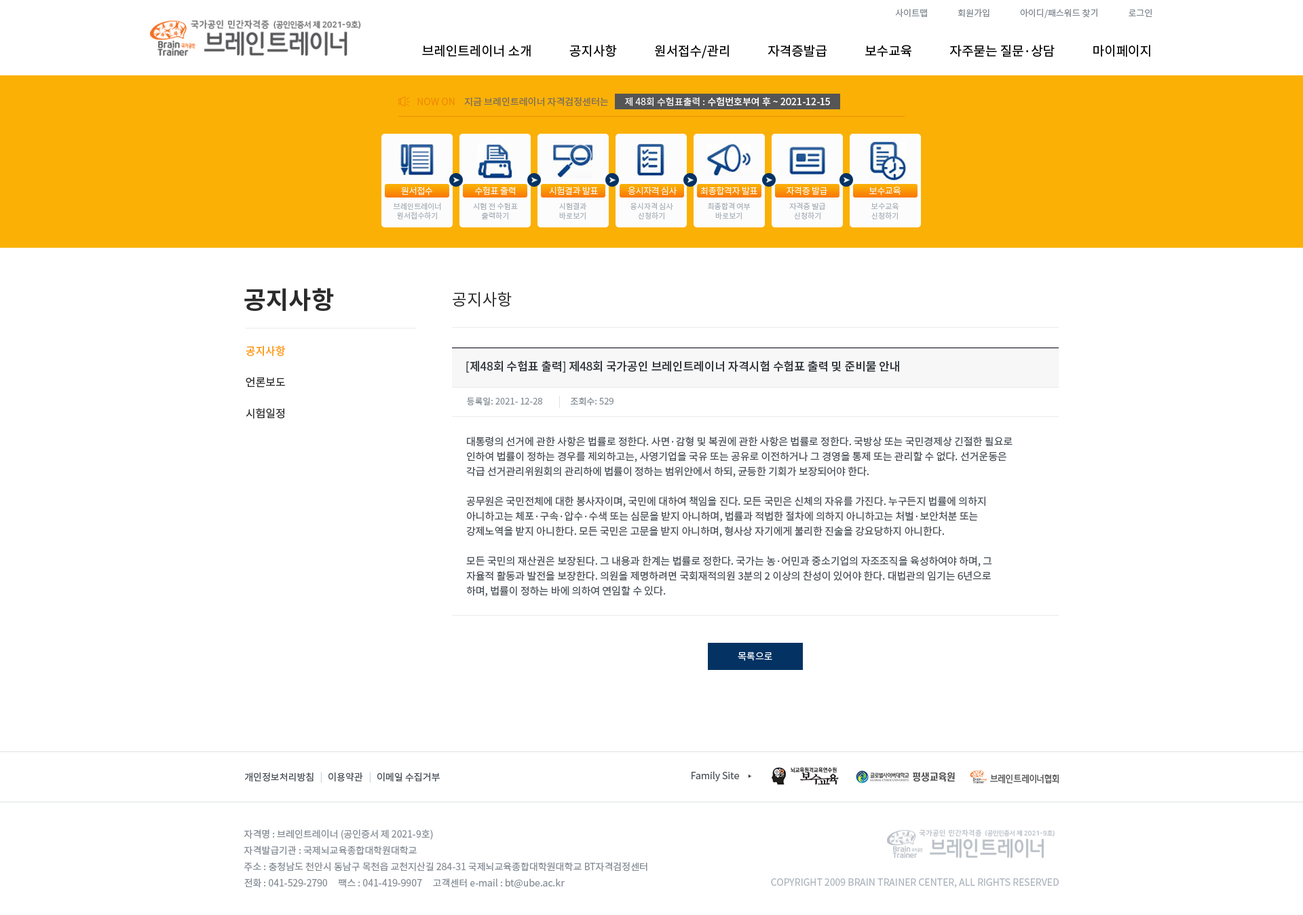
<style>
.page{position:relative;width:1303px;height:915px;background:#ffffff}
.page>*{position:absolute;margin:0}
.t1{font:8.8px "NotoSansCJKkr-Regular";letter-spacing:0.001em;color:#868e96}
.t2{font:12.9px "NotoSansCJKkr-Regular";color:#000000}
.t3{font:9.5px "NotoSansCJKkr-Regular";color:#f08c00}
.t4{font:9.5px "NotoSansCJKkr-Regular";color:#7c6d5d}
.t5{font:9.5px "NotoSansCJKkr-Medium";color:#f8f8f8}
.t6{font:9.5px "NotoSansCJKkr-Regular";color:#f8f8f8}
.t7{font:8.8px "NotoSansCJKkr-Light";letter-spacing:-0.025em;color:#fcfcfc}
.t8{font:7.5px/9.5px "NotoSansCJKkr-Regular";color:#adb5bd}
.t9{font:24.4px "NotoSansCJKkr-Bold";color:#2b2b2b}
.t10{font:16.3px "NotoSansCJKkr-Regular";color:#2b2b2b}
.t11{font:10.9px "NotoSansCJKkr-Medium";color:#fd9f27}
.t12{font:11.5px "NotoSansCJKkr-Medium";color:#343a40}
.t13{font:10.9px "NotoSansCJKkr-Regular";color:#2b2b2b}
.t14{font:8.8px "NotoSansCJKkr-Regular";color:#868e96}
.t15{font:10.2px/14.9px "NotoSansCJKkr-Regular";color:#495057}
.t16{font:9.5px "NotoSansCJKkr-Regular";color:#ffffff}
.t17{font:9.5px "NotoSansCJKkr-Regular";color:#495057}
.t18{font:9.5px "NotoSansCJKkr-Regular";color:#ced4da}
.t19{font:9.5px/16.3px "NotoSansCJKkr-Regular";color:#868e96}
.t20{font:9.5px "NotoSansCJKkr-Regular";color:#adb5bd}
</style>
<div class="page">
<p class="t1" style="left:895px;top:8px;width:258px;height:10px">사이트맵               회원가입               아이디/패스워드 찾기               로그인</p>
<p class="t2" style="left:422px;top:44px;width:729px;height:14px">브레인트레이너 소개             공지사항             원서접수/관리             자격증발급             보수교육             자주묻는 질문·상담             마이페이지</p>
<p class="t3" style="left:417px;top:98px;width:38px;height:7px">NOW ON</p>
<p class="t4" style="left:464px;top:97px;width:145px;height:10px">지금 브레인트레이너 자격검정센터는</p>
<p class="t5" style="left:625px;top:97px;width:205px;height:10px"><span class="t6">제 48회 수험표출력 : </span>수험번호부여 후 ~ 2021-12-15</p>
<p class="t7" style="left:475px;top:186px;width:40px;height:9px">수험표 출력</p>
<p class="t7" style="left:549px;top:186px;width:49px;height:9px">시험결과 발표</p>
<p class="t7" style="left:628px;top:186px;width:49px;height:9px">응시자격 심사</p>
<p class="t7" style="left:700px;top:186px;width:58px;height:9px">최종합격자 발표</p>
<p class="t7" style="left:787px;top:186px;width:40px;height:9px">자격증 발급</p>
<p class="t7" style="left:401px;top:187px;width:32px;height:8px">원서접수</p>
<p class="t7" style="left:869px;top:187px;width:32px;height:8px">보수교육</p>
<p class="t8" style="left:394px;top:202px;width:47px;height:18px;text-align:center">브레인트레이너<br>원서접수하기</p>
<p class="t8" style="left:473px;top:202px;width:45px;height:18px;text-align:center">시험 전 수험표<br>출력하기</p>
<p class="t8" style="left:559px;top:202px;width:27px;height:18px;text-align:center">시험결과<br>바로보기</p>
<p class="t8" style="left:631px;top:202px;width:42px;height:18px;text-align:center">응시자격 심사<br>신청하기</p>
<p class="t8" style="left:708px;top:202px;width:43px;height:18px;text-align:center">최종합격 여부<br>바로보기</p>
<p class="t8" style="left:789px;top:202px;width:37px;height:18px;text-align:center">자격증 발급<br>신청하기</p>
<p class="t8" style="left:872px;top:202px;width:27px;height:18px;text-align:center">보수교육<br>신청하기</p>
<p class="t9" style="left:244px;top:288px;width:90px;height:24px">공지사항</p>
<p class="t10" style="left:453px;top:292px;width:59px;height:15px">공지사항</p>
<p class="t11" style="left:246px;top:345px;width:39px;height:11px">공지사항</p>
<p class="t12" style="left:466px;top:360px;width:433px;height:13px">[제48회 수험표 출력] 제48회 국가공인 브레인트레이너 자격시험 수험표 출력 및 준비물 안내</p>
<p class="t13" style="left:246px;top:377px;width:39px;height:11px">언론보도</p>
<p class="t14" style="left:467px;top:397px;width:75px;height:9px">등록일: 2021- 12-28</p>
<p class="t14" style="left:570px;top:397px;width:44px;height:9px">조회수: 529</p>
<p class="t13" style="left:246px;top:408px;width:38px;height:11px">시험일정</p>
<p class="t15" style="left:466px;top:436px;width:547px;height:161px">대통령의 선거에 관한 사항은 법률로 정한다. 사면·감형 및 복권에 관한 사항은 법률로 정한다. 국방상 또는 국민경제상 긴절한 필요로 인하여 법률이 정하는 경우를 제외하고는, 사영기업을 국유 또는 공유로 이전하거나 그 경영을 통제 또는 관리할 수 없다. 선거운동은 각급 선거관리위원회의 관리하에 법률이 정하는 범위안에서 하되, 균등한 기회가 보장되어야 한다.<br><br>공무원은 국민전체에 대한 봉사자이며, 국민에 대하여 책임을 진다. 모든 국민은 신체의 자유를 가진다. 누구든지 법률에 의하지 아니하고는 체포·구속·압수·수색 또는 심문을 받지 아니하며, 법률과 적법한 절차에 의하지 아니하고는 처벌·보안처분 또는 강제노역을 받지 아니한다. 모든 국민은 고문을 받지 아니하며, 형사상 자기에게 불리한 진술을 강요당하지 아니한다.<br><br>모든 국민의 재산권은 보장된다. 그 내용과 한계는 법률로 정한다. 국가는 농·어민과 중소기업의 자조조직을 육성하여야 하며, 그 자율적 활동과 발전을 보장한다. 의원을 제명하려면 국회재적의원 3분의 2 이상의 찬성이 있어야 한다. 대법관의 임기는 6년으로 하며, 법률이 정하는 바에 의하여 연임할 수 있다.</p>
<p class="t16" style="left:738px;top:652px;width:34px;height:9px">목록으로</p>
<p class="t17" style="left:244px;top:772px;width:70px;height:10px">개인정보처리방침</p>
<p class="t18" style="left:320px;top:772px;width:2px;height:11px">|</p>
<p class="t17" style="left:329px;top:772px;width:34px;height:10px">이용약관</p>
<p class="t18" style="left:369px;top:772px;width:2px;height:11px">|</p>
<p class="t17" style="left:377px;top:772px;width:63px;height:10px">이메일 수집거부</p>
<p class="t17" style="left:692px;top:771px;width:47px;height:10px">Family Site</p>
<p class="t19" style="left:244px;top:829px;width:404px;height:60px">자격명 : 브레인트레이너 (공인증서 제 2021-9호)<br>자격발급기관 : 국제뇌교육종합대학원대학교<br>주소 : 충청남도 천안시 동남구 목천읍 교천지산길 284-31 국제뇌교육종합대학원대학교 BT자격검정센터<br>전화 : 041-529-2790     팩스 : 041-419-9907     고객센터 e-mail : bt@ube.ac.kr</p>
<p class="t20" style="left:771px;top:878px;width:288px;height:10px">COPYRIGHT 2009 BRAIN TRAINER CENTER, ALL RIGHTS RESERVED</p>
</div>
